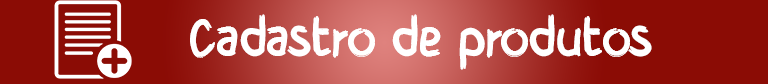
<style>
.page{position:relative;width:768px;height:84px;background:#8b0c05}
.page>*{position:absolute;margin:0}
.t1{font:45.7px "BrushyCre";color:#ffffff}
</style>
<div class="page">
<p class="t1" style="left:190px;top:14px;width:462px;height:56px">Cadastro de produtos</p>
</div>
